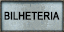
<style>
.page{position:relative;width:64px;height:32px}
.page>*{position:absolute;margin:0}
.t1{font:10.7px "ArialNarrow";color:#000000;text-transform:uppercase;font-weight:bold}
</style>
<div class="page">
<p class="t1" style="left:4px;top:11px;width:56px;height:9px">bilheteria</p>
</div>
